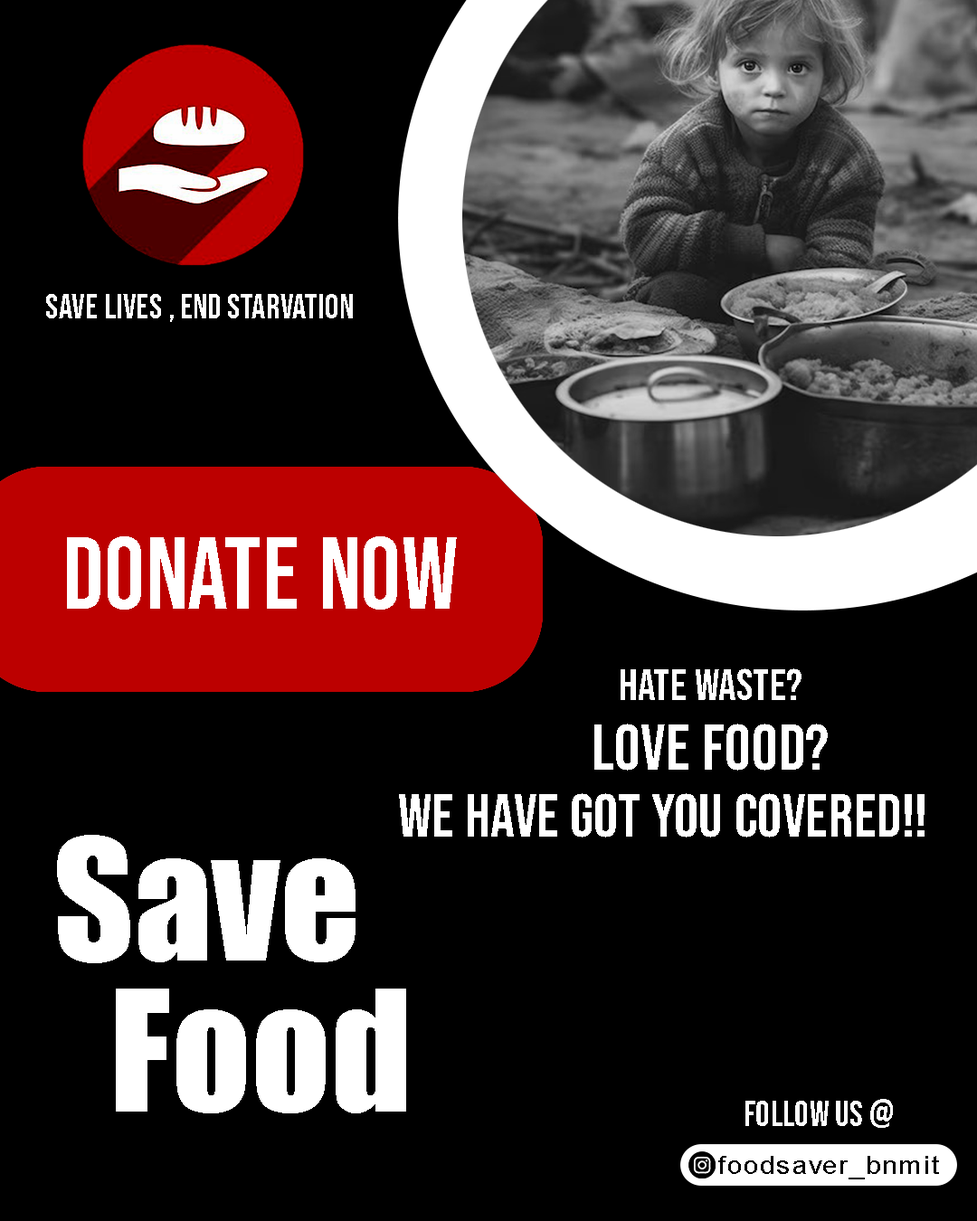
<style>
.page{position:relative;width:977px;height:1221px;background:#000000}
.page>*{position:absolute;margin:0}
.t1{font:34.5px "BebasNeue-Regular";color:#ffffff}
.t2{font:100.9px "BebasNeue-Regular";color:#ffffff}
.t3{font:44px "BebasNeue-Regular";color:#ffffff}
.t4{font:65.5px "BebasNeue-Regular";color:#ffffff}
.t5{font:60.8px "BebasNeue-Regular";color:#ffffff}
.t6{font:155.6px "Impact";color:#ffffff}
.t7{font:35.5px "BebasNeue-Regular";color:#ffffff}
.t8{font:25.2px "ArialMT";letter-spacing:0.05em;color:#000000;scale:1.08 1}
</style>
<div class="page">
<p class="t1" style="left:46px;top:294px;width:307px;height:28px">save lives , end starvation</p>
<p class="t2" style="left:67px;top:536px;width:390px;height:74px">DONATE NOW</p>
<p class="t3" style="left:620px;top:668px;width:181px;height:32px">Hate waste?</p>
<p class="t4" style="left:594px;top:723px;width:233px;height:48px">Love food?</p>
<p class="t5" style="left:399px;top:793px;width:525px;height:44px">we have got you covered!!</p>
<p class="t6" style="left:57px;top:835px;width:298px;height:128px">Save</p>
<p class="t6" style="left:116px;top:988px;width:290px;height:125px">Food</p>
<p class="t7" style="left:745px;top:1099px;width:148px;height:29px">follow us @</p>
<p class="t8" style="left:718px;top:1156px;width:221px;height:23px">foodsaver_bnmit</p>
</div>
